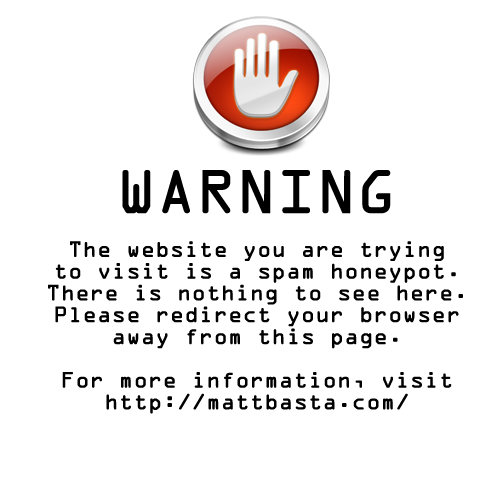
<style>
.page{position:relative;width:500px;height:500px;background:#ffffff}
.page>*{position:absolute;margin:0}
.t1{font:20px/21.8px "OCRAStd";letter-spacing:-0.02em;color:#000000;font-weight:bold}
.t2{font:55px/21.8px "OCRAStd";letter-spacing:-0.02em;color:#000000;font-weight:bold}
</style>
<div class="page">
<p class="t1" style="left:48px;top:170px;width:415px;height:244px;text-align:center"><span class="t2">WARNING<br><br></span>The website you are trying<br>to visit is a spam honeypot.<br>There is nothing to see here.<br>Please redirect your browser<br>away from this page.<br><br>For more information, visit<br>http://mattbasta.com/</p>
</div>
